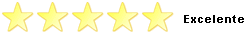
<style>
.page{position:relative;width:250px;height:37px;background:#ffffff}
.page>*{position:absolute;margin:0}
.t1{font:11px "Arial-BoldMT";letter-spacing:0.1em;color:#000000}
</style>
<div class="page">
<p class="t1" style="left:184px;top:15px;width:60px;height:8px">Excelente</p>
</div>
